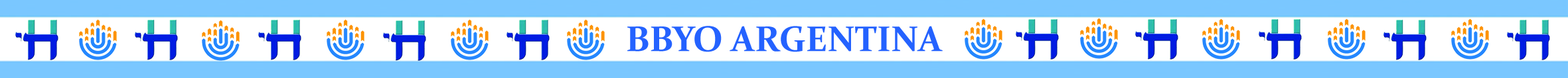
<style>
.page{position:relative;width:1568px;height:78px;background:#7ac7ff}
.page>*{position:absolute;margin:0}
.t1{font:36px "Constantia-Bold";color:#2462ff}
</style>
<div class="page">
<p class="t1" style="left:627px;top:26px;width:316px;height:26px">BBYO ARGENTINA</p>
</div>
